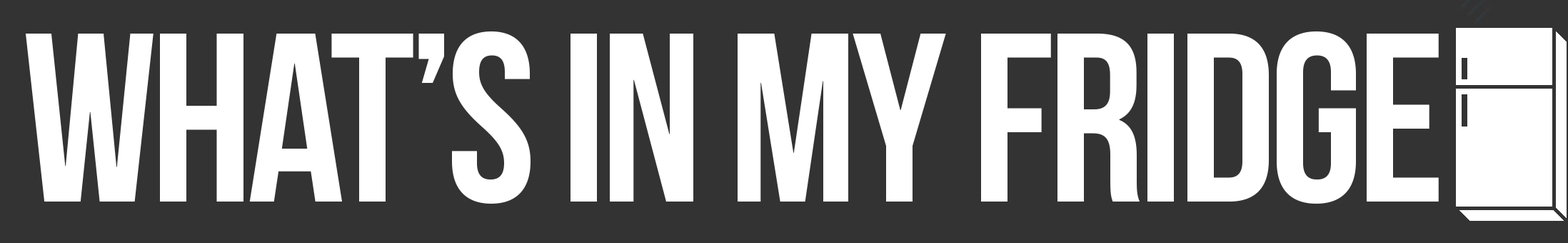
<style>
.page{position:relative;width:1568px;height:243px;background:#333333}
.page>*{position:absolute;margin:0}
.t1{font:239.3px "BebasNeue";letter-spacing:-0.025em;color:#ffffff}
</style>
<div class="page">
<p class="t1" style="left:26px;top:31px;width:1413px;height:172px">WHAT’S iN MY FRIDGE</p>
</div>
